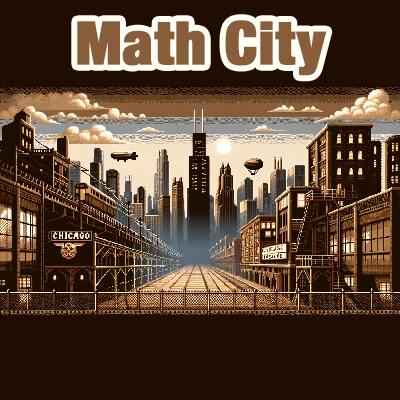
<style>
.page{position:relative;width:400px;height:400px;background:#200d01}
.page>*{position:absolute;margin:0}
.t1{font:60px "HelveticaNeue-CondensedBlack";color:#885e3a;font-weight:bold}
</style>
<div class="page">
<p class="t1" style="left:77px;top:20px;width:250px;height:56px">Math City</p>
</div>
